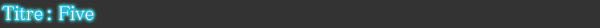
<style>
.page{position:relative;width:600px;height:28px;background:#333333}
.page>*{position:absolute;margin:0}
.t1{font:20px "MS-PMincho";color:#ffffff}
</style>
<div class="page">
<p class="t1" style="left:2px;top:6px;width:92px;height:15px">Titre : Five</p>
</div>
